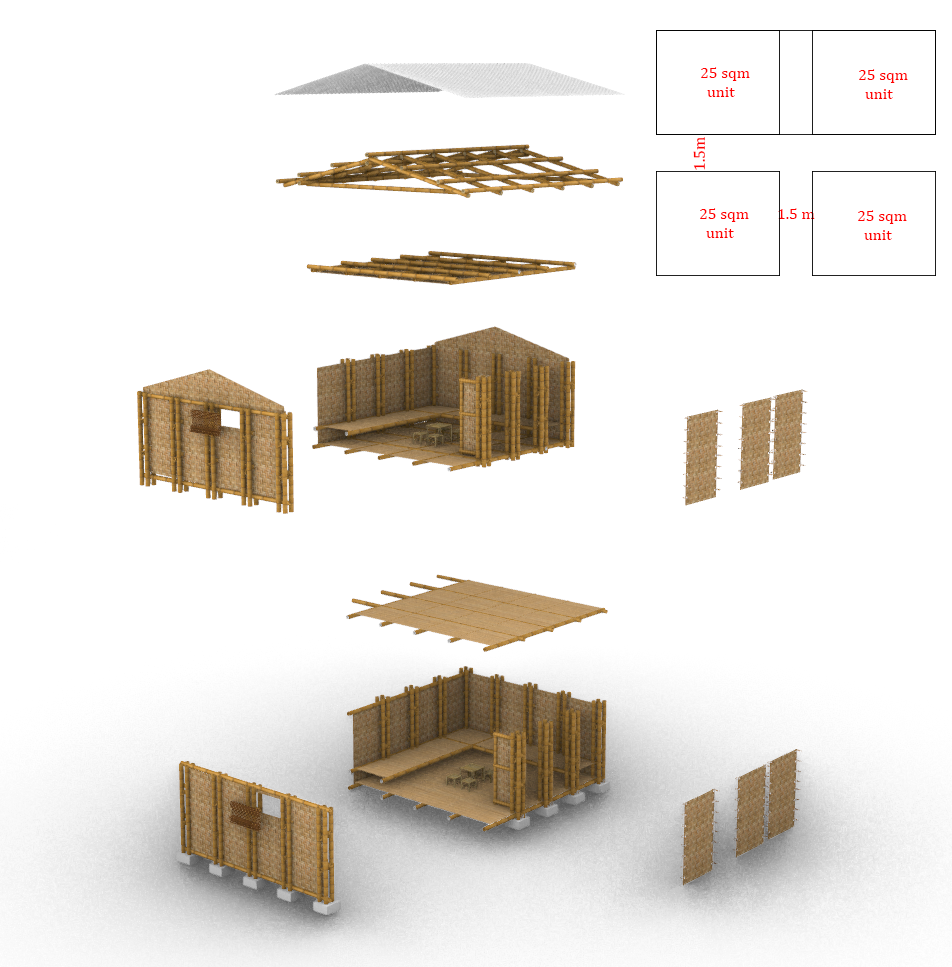
<style>
.page{position:relative;width:952px;height:967px;background:#ffffff}
.page>*{position:absolute;margin:0}
.t1{font:16px "Cambria";color:#ff0000}
</style>
<div class="page">
<p class="t1" style="left:701px;top:67px;width:49px;height:30px">25 sqm<br>  unit</p>
<p class="t1" style="left:859px;top:69px;width:49px;height:30px">25 sqm<br>  unit</p>
<p class="t1" style="left:693px;top:137px;width:12px;height:33px;rotate:-90deg">1.5m</p>
<p class="t1" style="left:700px;top:208px;width:49px;height:30px">25 sqm<br>  unit</p>
<p class="t1" style="left:778px;top:208px;width:37px;height:11px">1.5 m</p>
<p class="t1" style="left:858px;top:210px;width:49px;height:30px">25 sqm<br>  unit</p>
</div>
